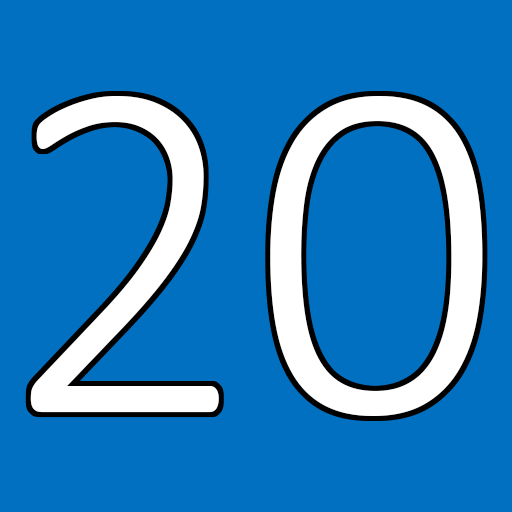
<style>
.page{position:relative;width:512px;height:512px;background:#0170c1}
.page>*{position:absolute;margin:0}
.t1{font:493.9px "Calibri-Light";color:#ffffff}
</style>
<div class="page">
<p class="t1" style="left:30px;top:96px;width:453px;height:320px">20</p>
</div>
